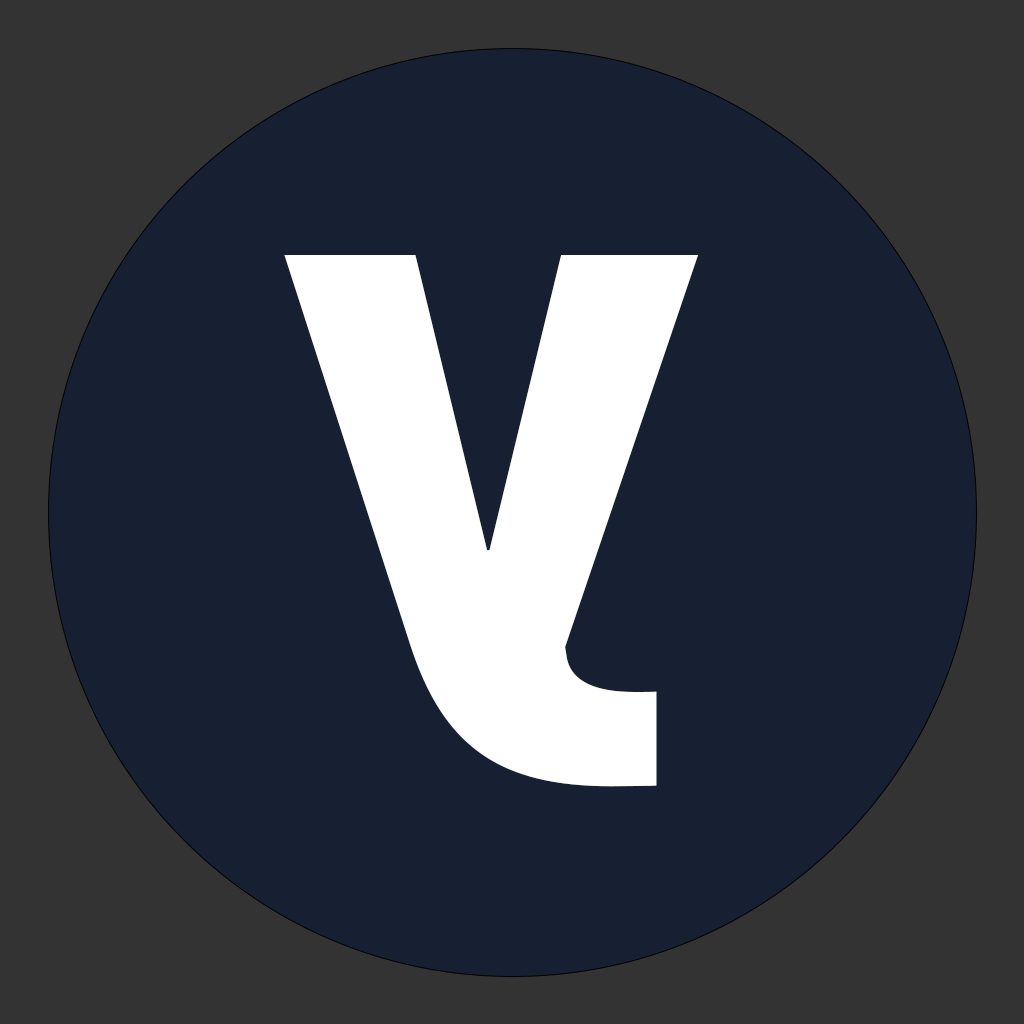
<style>
.page{position:relative;width:1024px;height:1024px;background:#172032}
.page>*{position:absolute;margin:0}
.t1{font:716.7px "SFUIDisplay-Heavy";color:#ffffff}
</style>
<div class="page">
<p class="t1" style="left:284px;top:255px;width:414px;height:532px;rotate:180deg">y</p>
</div>
